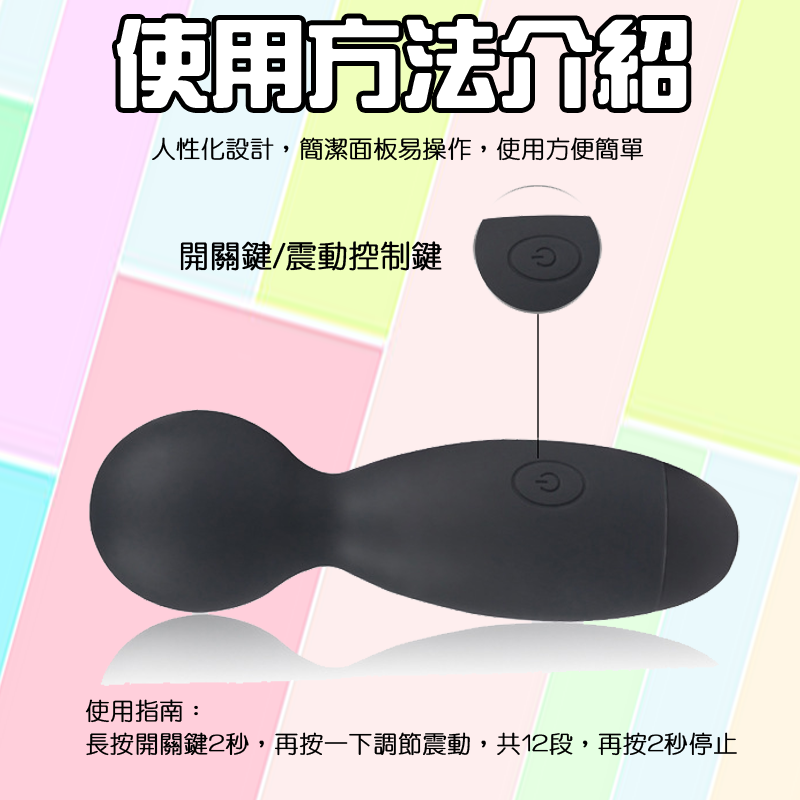
<style>
.page{position:relative;width:800px;height:800px}
.page>*{position:absolute;margin:0}
.t1{font:93.6px "HanWangZonYi";color:#ffffff;font-weight:bold}
.t2{font:24px "HanWangYenLight";color:#000000;font-weight:bold}
.t3{font:30.7px "HanWangYenLight";color:#000000;font-weight:bold}
</style>
<div class="page">
<p class="t1" style="left:117px;top:18px;width:570px;height:90px">使用方法介紹</p>
<p class="t2" style="left:152px;top:137px;width:492px;height:24px">人性化設計，簡潔面板易操作，使用方便簡單</p>
<p class="t3" style="left:180px;top:241px;width:262px;height:30px">開關鍵/震動控制鍵</p>
<p class="t2" style="left:85px;top:699px;width:652px;height:57px">使用指南：<br>長按開關鍵2秒，再按一下調節震動，共12段，再按2秒停止</p>
</div>
